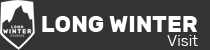
<style>
.page{position:relative;width:210px;height:50px;background:#333333}
.page>*{position:absolute;margin:0}
.t1{font:23px "Rubik-Bold";color:#ffffff}
.t2{font:16px "Rubik-Light";color:#ffffff}
</style>
<div class="page">
<p class="t1" style="left:42px;top:16px;width:155px;height:16px">LONG WINTER</p>
<p class="t2" style="left:167px;top:35px;width:31px;height:11px">Visit</p>
</div>
